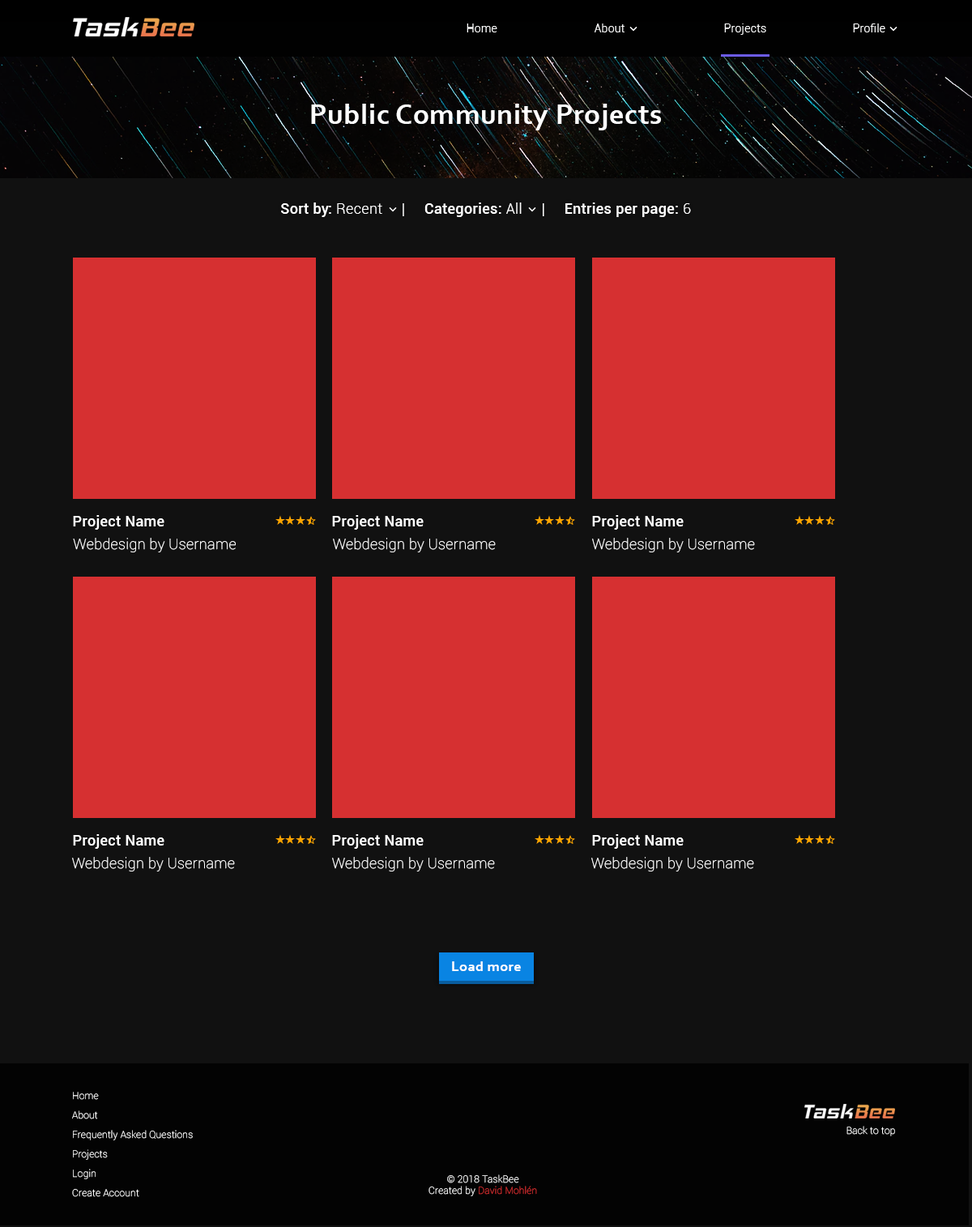
<style>
.page{position:relative;width:972px;height:1227px;background:#111111}
.page>*{position:absolute;margin:0}
.t1{font:11.3px "Roboto-Light";letter-spacing:0.02em;color:#ffffff}
.t2{font:29.2px "Corbel-Bold";letter-spacing:0.02em;color:#ffffff}
.t3{font:14.6px "Roboto-Medium";letter-spacing:0.02em;color:#ffffff}
.t4{font:14.6px "Roboto-Light";letter-spacing:0.02em;color:#ffffff}
.t5{font:14.6px "Roboto-Thin";letter-spacing:0.02em;color:#ffffff}
.t6{font:14.6px "Corbel-Bold";letter-spacing:0.02em;color:#ffffff}
.t7{font:9.7px/19.4px "Roboto-Thin";letter-spacing:0.02em;color:#ffffff}
.t8{font:9.7px "Roboto-Thin";letter-spacing:0.02em;color:#ffffff}
.t9{font:9.7px "Roboto-Thin";letter-spacing:0.02em;color:#d63031}
</style>
<div class="page">
<p class="t1" style="left:466px;top:23px;width:31px;height:9px">Home</p>
<p class="t1" style="left:594px;top:23px;width:30px;height:9px">About</p>
<p class="t1" style="left:724px;top:23px;width:42px;height:12px">Projects</p>
<p class="t1" style="left:853px;top:23px;width:32px;height:9px">Profile</p>
<p class="t2" style="left:311px;top:104px;width:350px;height:26px">Public Community Projects</p>
<p class="t3" style="left:281px;top:202px;width:410px;height:15px">Sort by: <span class="t4">Recent     |     </span>Categories: <span class="t4">All     |     </span>Entries per page: <span class="t4">6</span></p>
<p class="t3" style="left:73px;top:515px;width:91px;height:15px">Project Name</p>
<p class="t3" style="left:332px;top:515px;width:92px;height:15px">Project Name</p>
<p class="t3" style="left:592px;top:515px;width:92px;height:15px">Project Name</p>
<p class="t5" style="left:73px;top:538px;width:163px;height:14px">Webdesign by Username</p>
<p class="t5" style="left:333px;top:538px;width:163px;height:14px">Webdesign by Username</p>
<p class="t5" style="left:592px;top:538px;width:163px;height:14px">Webdesign by Username</p>
<p class="t3" style="left:73px;top:834px;width:91px;height:15px">Project Name</p>
<p class="t3" style="left:332px;top:834px;width:92px;height:15px">Project Name</p>
<p class="t3" style="left:592px;top:834px;width:92px;height:15px">Project Name</p>
<p class="t5" style="left:72px;top:857px;width:163px;height:14px">Webdesign by Username</p>
<p class="t5" style="left:332px;top:857px;width:163px;height:14px">Webdesign by Username</p>
<p class="t5" style="left:591px;top:857px;width:163px;height:14px">Webdesign by Username</p>
<p class="t6" style="left:452px;top:961px;width:69px;height:10px">Load more</p>
<p class="t7" style="left:72px;top:1092px;width:121px;height:105px">Home<br>About<br>Frequently Asked Questions<br>Projects<br>Login<br>Create Account</p>
<p class="t8" style="left:846px;top:1126px;width:49px;height:10px">Back to top</p>
<p class="t8" style="left:428px;top:1174px;width:109px;height:22px;text-align:center">© 2018 TaskBee<br>Created by <span class="t9">David Mohlén</span></p>
</div>
